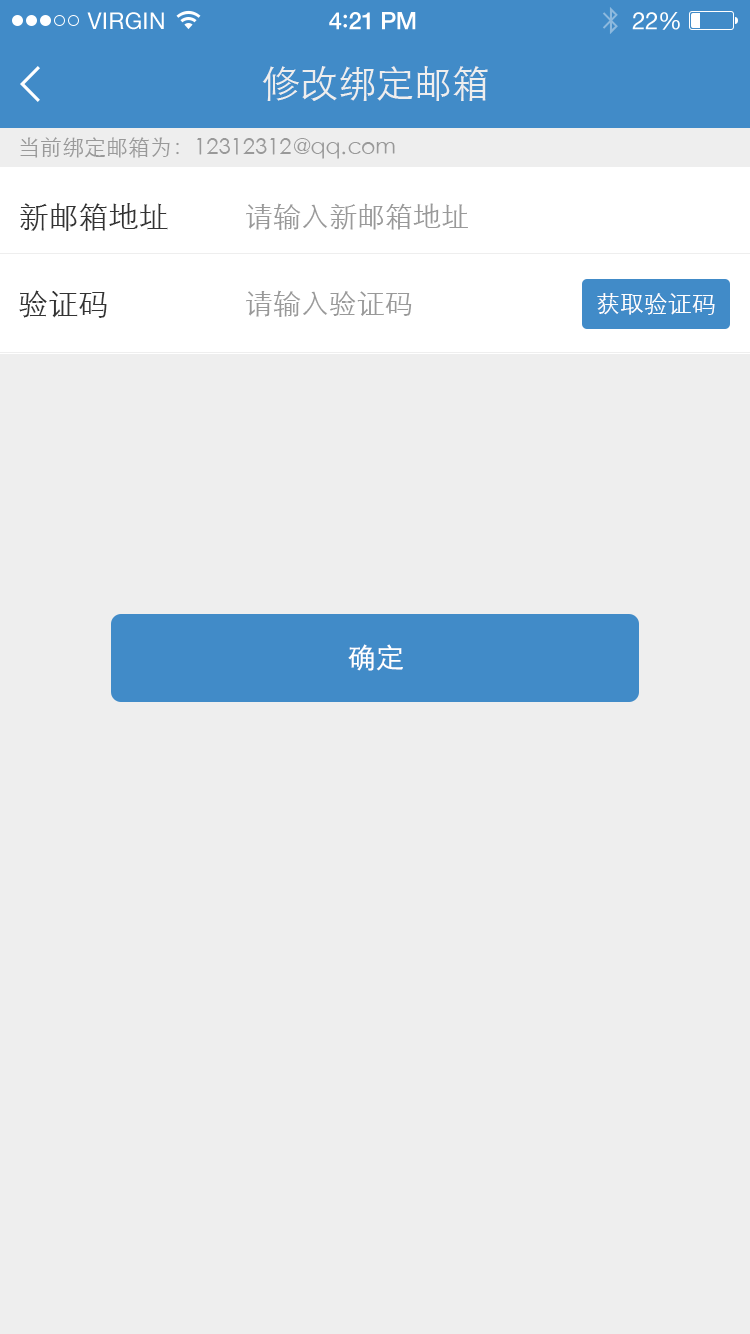
<style>
.page{position:relative;width:750px;height:1334px;background:#eeeeee}
.page>*{position:absolute;margin:0}
.t1{font:23px "HelveticaNeue";letter-spacing:0.02em;color:#ffffff}
.t2{font:24px "HelveticaNeue-Medium";letter-spacing:-0.02em;color:#ffffff}
.t3{font:26px "Avenir-Medium";letter-spacing:-0.02em;color:#ffffff}
.t4{font:24px "HelveticaNeue";letter-spacing:-0.02em;color:#ffffff}
.t5{font:38px "STXihei";color:#eeeeee}
.t6{font:22px "STXihei";color:#999999}
.t7{font:30px "STXihei";color:#333333}
.t8{font:28px "STXihei";color:#999999}
.t9{font:24px "STXihei";color:#ffffff}
.t10{font:28px "STXihei";color:#ffffff}
</style>
<div class="page">
<p class="t1" style="left:87px;top:12px;width:77px;height:18px">VIRGIN</p>
<p class="t2" style="left:329px;top:12px;width:87px;height:18px">4<span class="t3">:</span>21 PM</p>
<p class="t4" style="left:632px;top:12px;width:48px;height:18px">22%</p>
<p class="t5" style="left:262px;top:66px;width:226px;height:35px">修改绑定邮箱</p>
<p class="t6" style="left:20px;top:137px;width:375px;height:22px">当前绑定邮箱为：12312312@qq.com</p>
<p class="t7" style="left:20px;top:203px;width:148px;height:28px">新邮箱地址</p>
<p class="t8" style="left:246px;top:203px;width:222px;height:27px">请输入新邮箱地址</p>
<p class="t7" style="left:19px;top:290px;width:88px;height:28px">验证码</p>
<p class="t8" style="left:246px;top:290px;width:166px;height:27px">请输入验证码</p>
<p class="t9" style="left:597px;top:293px;width:118px;height:22px">获取验证码</p>
<p class="t10" style="left:348px;top:644px;width:55px;height:27px">确定</p>
</div>
